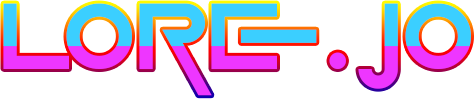
<style>
.page{position:relative;width:474px;height:99px;background:#ffffff}
.page>*{position:absolute;margin:0}
.t1{font:104.7px "GameOfSquids"}
</style>
<div class="page">
<p class="t1" style="left:3px;top:3px;width:468px;height:93px">Lore.Jo</p>
</div>
